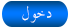
<style>
.page{position:relative;width:70px;height:28px}
.page>*{position:absolute;margin:0}
.t1{font:21.1px "TraditionalArabic";letter-spacing:-0.08em;color:#fbfcfc;scale:0.84 1}
</style>
<div class="page">
<p class="t1" style="left:22px;top:6px;width:30px;height:17px">د خو ل</p>
</div>
